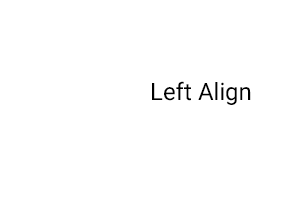
<style>
.page{position:relative;width:300px;height:200px;background:#ffffff}
.page>*{position:absolute;margin:0}
.t1{font:24px "Roboto-Regular";color:#000000}
</style>
<div class="page">
<p class="t1" style="left:152px;top:81px;width:99px;height:24px">Left Align</p>
</div>
